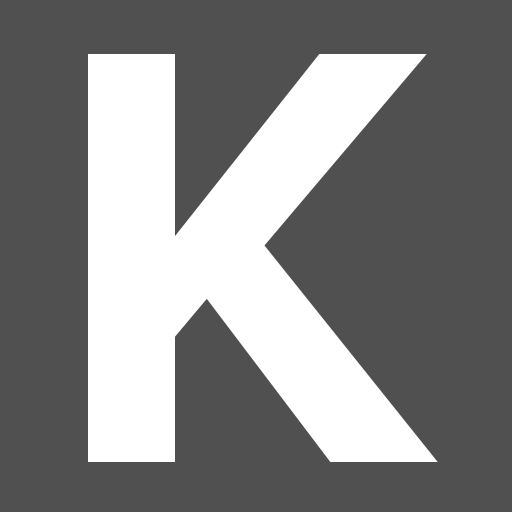
<style>
.page{position:relative;width:512px;height:512px;background:#505050}
.page>*{position:absolute;margin:0}
.t1{font:1050px "ProximaNova-Bold";letter-spacing:-0.025em;color:#ffffff}
</style>
<div class="page">
<p class="t1" style="left:88px;top:54px;width:350px;height:408px">K</p>
</div>
